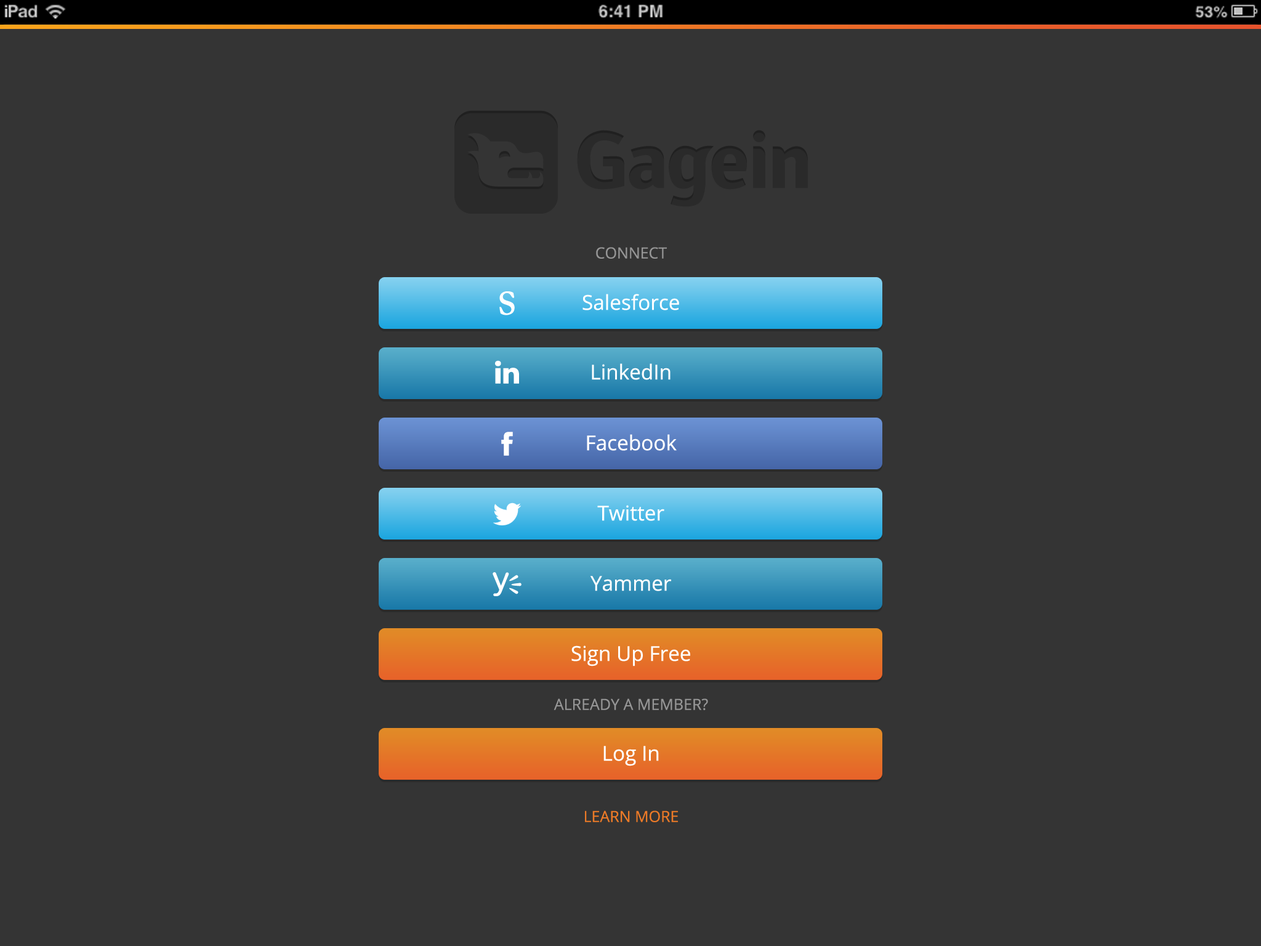
<style>
.page{position:relative;width:1261px;height:946px;background:#343434}
.page>*{position:absolute;margin:0}
.t1{font:15.4px "OpenSans";color:#969696}
.t2{font:20.5px "OpenSans";color:#ffffff}
.t3{font:15.4px "OpenSans";color:#ec7a27}
</style>
<div class="page">
<p class="t1" style="left:596px;top:247px;width:71px;height:12px">CONNECT</p>
<p class="t2" style="left:582px;top:294px;width:97px;height:16px">Salesforce</p>
<p class="t2" style="left:592px;top:363px;width:78px;height:17px">LinkedIn</p>
<p class="t2" style="left:587px;top:434px;width:90px;height:17px">Facebook</p>
<p class="t2" style="left:597px;top:505px;width:67px;height:16px">Twitter</p>
<p class="t2" style="left:590px;top:576px;width:82px;height:15px">Yammer</p>
<p class="t2" style="left:571px;top:645px;width:119px;height:21px">Sign Up Free</p>
<p class="t1" style="left:553px;top:698px;width:155px;height:12px">ALREADY A MEMBER?</p>
<p class="t2" style="left:603px;top:746px;width:56px;height:20px">Log In</p>
<p class="t3" style="left:585px;top:810px;width:93px;height:12px">LEARN MORE</p>
</div>
